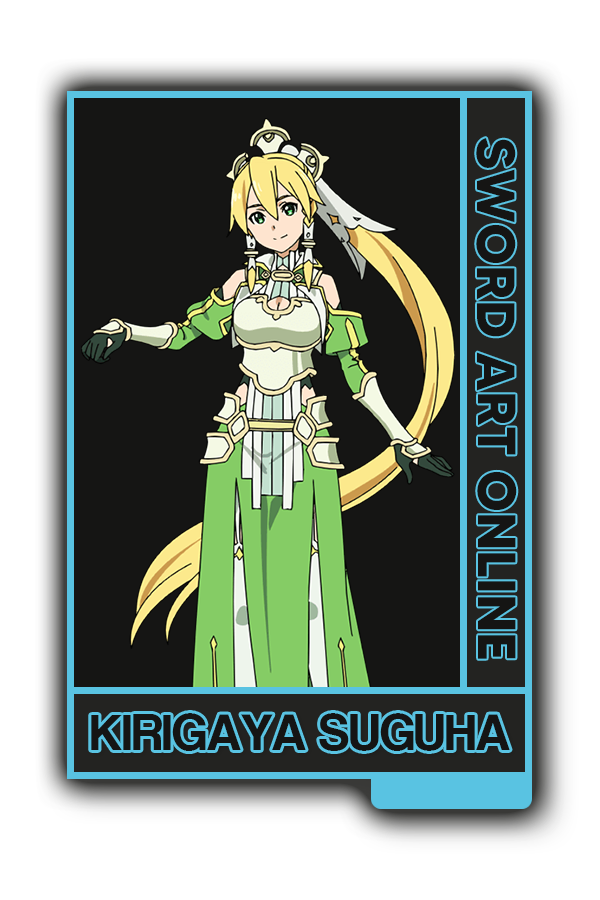
<style>
.page{position:relative;width:600px;height:900px;background:#151514}
.page>*{position:absolute;margin:0}
.t1{font:53.7px "MADETOMMY-Bold";color:#151514}
.t2{font:52.7px "CoolveticaRg-Regular";color:#151514}
</style>
<div class="page">
<p class="t1" style="left:476px;top:138px;width:41px;height:521px;rotate:90deg">SWORD ART ONLINE</p>
<p class="t2" style="left:91px;top:713px;width:419px;height:38px">KIRIGAYA SUGUHA</p>
</div>
